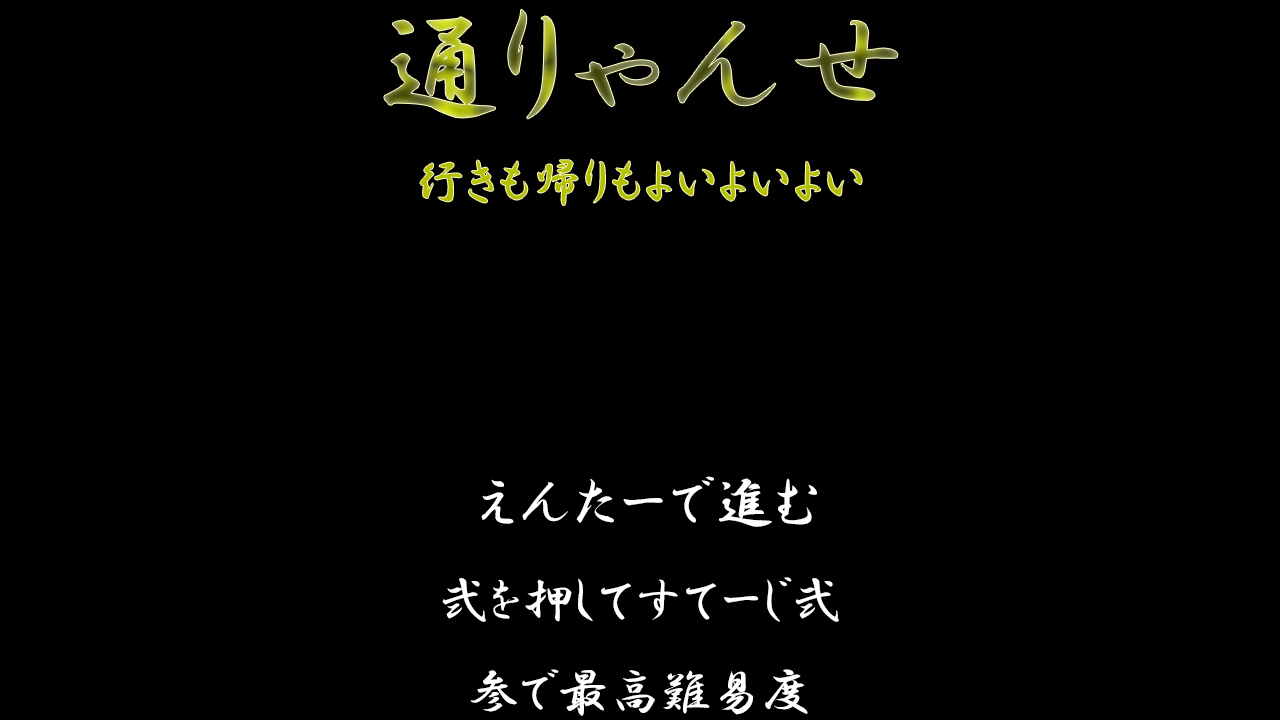
<style>
.page{position:relative;width:1280px;height:720px;background:#000000}
.page>*{position:absolute;margin:0}
.t1{font:125px "HGPGyoshotai"}
.t2{font:50px "HGPGyoshotai";color:#b4bf00}
.t3{font:58.3px "HGPGyoshotai";color:#ffffff}
.t4{font:51px "HGPGyoshotai";color:#ffffff}
</style>
<div class="page">
<p class="t1" style="left:384px;top:9px;width:514px;height:110px">通りゃんせ</p>
<p class="t2" style="left:420px;top:159px;width:442px;height:47px">行きも帰りもよいよいよい</p>
<p class="t3" style="left:481px;top:476px;width:336px;height:51px">えんたーで進む</p>
<p class="t4" style="left:442px;top:577px;width:397px;height:45px">弐を押してすてーじ弐</p>
<p class="t4" style="left:470px;top:669px;width:338px;height:47px">参で最高難易度</p>
</div>
